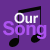
<style>
.page{position:relative;width:50px;height:50px;background:#662d91}
.page>*{position:absolute;margin:0}
.t1{font:14px "Arial-BoldMT";letter-spacing:-0.04em;color:#f4f4fa}
.t2{font:19px "Arial-BoldMT";letter-spacing:-0.04em;color:#ac53ef}
</style>
<div class="page">
<p class="t1" style="left:14px;top:12px;width:25px;height:12px">Our</p>
<p class="t2" style="left:3px;top:21px;width:44px;height:18px">Song</p>
</div>
